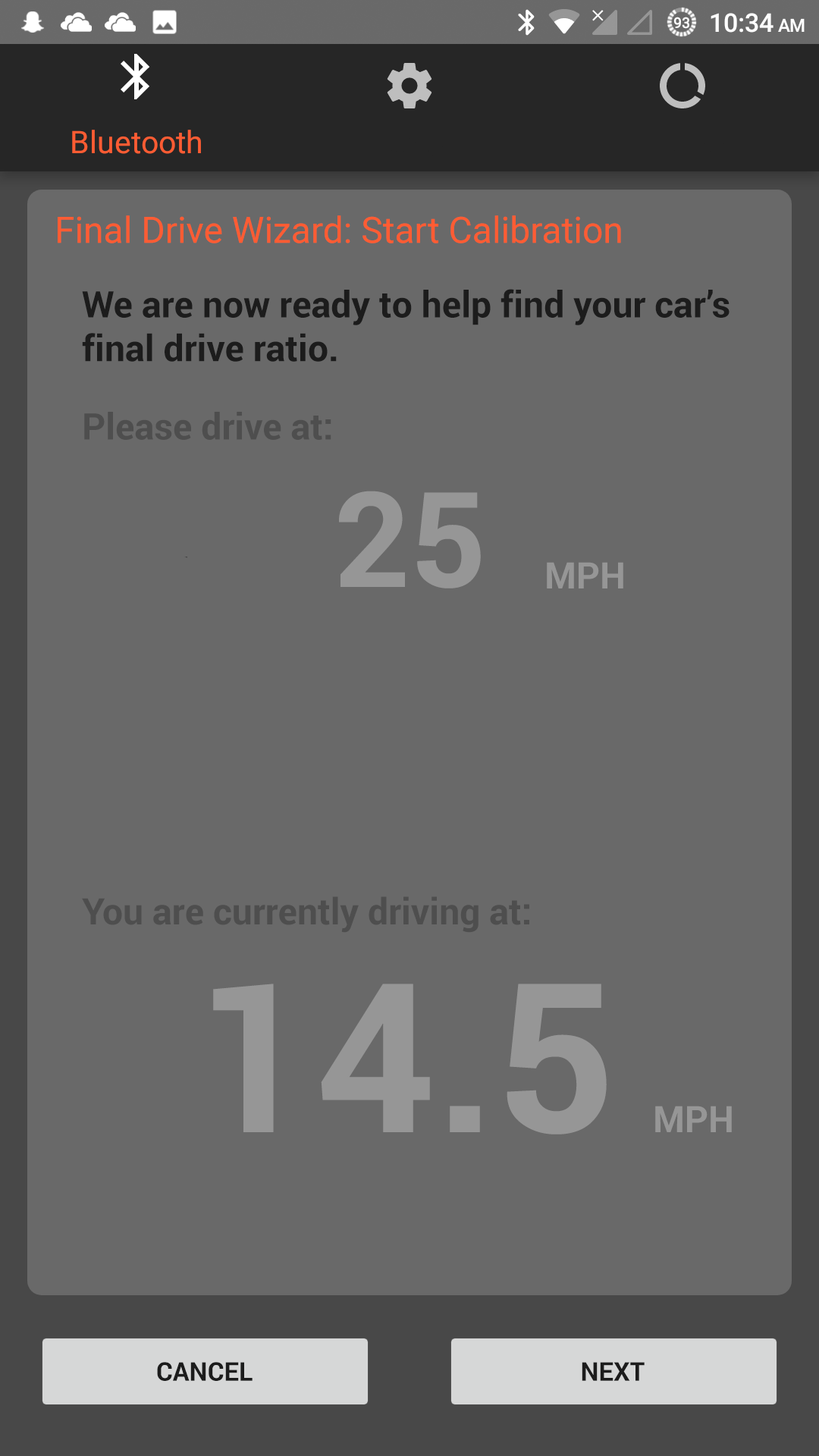
<style>
.page{position:relative;width:819px;height:1456px;background:#696969}
.page>*{position:absolute;margin:0}
.t1{font:36.4px "Roboto-Regular";color:#ff5c33}
.t2{font:36.4px "Roboto-Bold";color:#1c1c1c}
.t3{font:36.4px "Roboto-Bold";color:#4e4e4e}
.t4{font:132.7px "Roboto-Bold";color:#969696}
.t5{font:36.4px "Roboto-Bold";color:#969696}
.t6{font:208.5px "Roboto-Bold";color:#969696}
.t7{font:25.8px "Roboto-Bold";color:#1c1c1c}
</style>
<div class="page">
<p class="t1" style="left:58px;top:215px;width:563px;height:28px">Final Drive Wizard: Start Calibration</p>
<p class="t2" style="left:82px;top:289px;width:648px;height:73px">We are now ready to help find your car’s<br>final drive ratio.</p>
<p class="t3" style="left:84px;top:412px;width:247px;height:28px">Please drive at:</p>
<p class="t4" style="left:339px;top:491px;width:142px;height:97px">25</p>
<p class="t5" style="left:547px;top:562px;width:76px;height:26px">MPH</p>
<p class="t3" style="left:82px;top:896px;width:447px;height:37px">You are currently driving at:</p>
<p class="t6" style="left:213px;top:984px;width:394px;height:150px">14.5</p>
<p class="t5" style="left:655px;top:1106px;width:77px;height:26px">MPH</p>
<p class="t7" style="left:157px;top:1362px;width:96px;height:19px">CANCEL</p>
<p class="t7" style="left:582px;top:1362px;width:63px;height:19px">NEXT</p>
</div>
